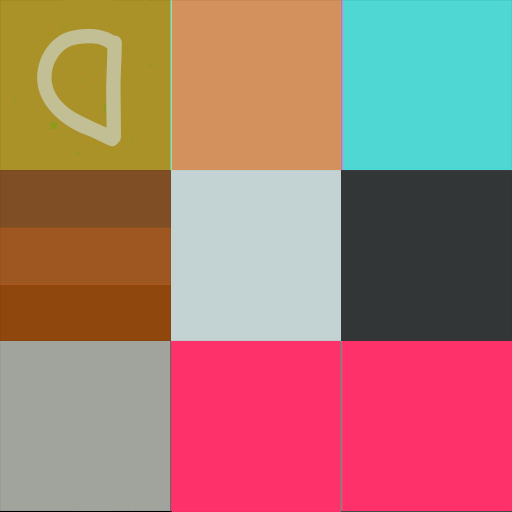
<style>
.page{position:relative;width:512px;height:512px;background:#ff316a}
.page>*{position:absolute;margin:0}
.t1{font:145px "ComicSansMS";color:#c3bf94}
</style>
<div class="page">
<p class="t1" style="left:37px;top:28px;width:85px;height:119px;rotate:-180deg">D</p>
</div>
